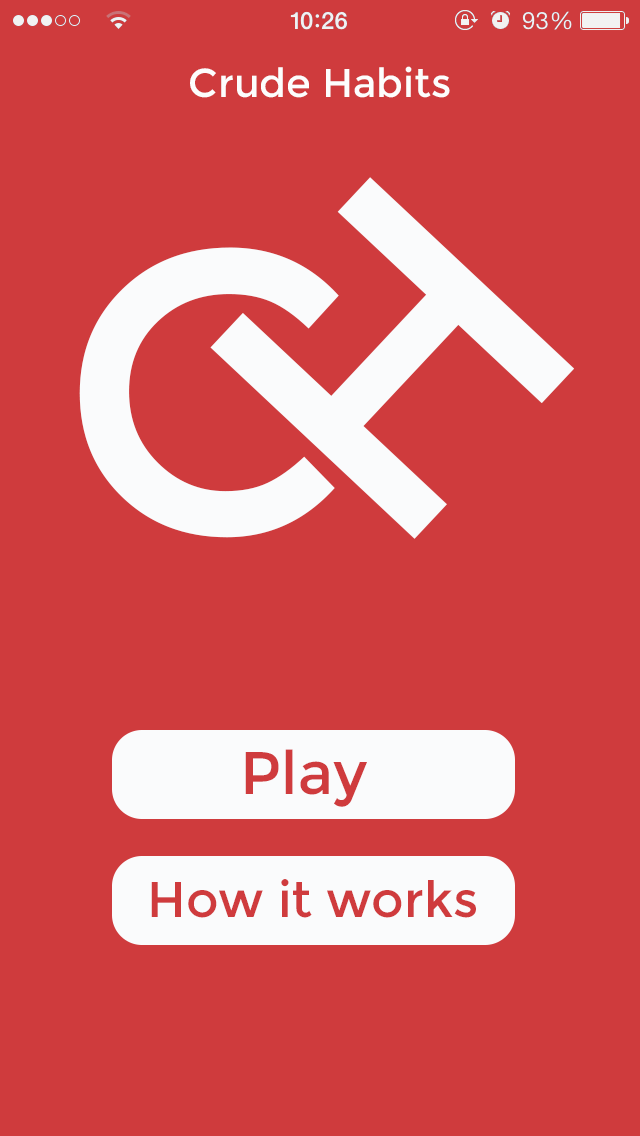
<style>
.page{position:relative;width:640px;height:1136px;background:#cf3b3d}
.page>*{position:absolute;margin:0}
.t1{font:40px "Montserrat-Regular";color:#fdfdfd}
.t2{font:400px "Montserrat-Regular";color:#fafbfc}
.t3{font:60px "Montserrat-Regular";color:#cf3b3d}
.t4{font:50px "Montserrat-Regular";color:#cf3b3d}
</style>
<div class="page">
<p class="t1" style="left:190px;top:66px;width:260px;height:32px">Crude Habits</p>
<p class="t2" style="left:210px;top:177px;width:365px;height:362px;rotate:-47deg">H</p>
<p class="t2" style="left:79px;top:247px;width:260px;height:291px">C</p>
<p class="t3" style="left:245px;top:749px;width:122px;height:58px">Play</p>
<p class="t4" style="left:151px;top:879px;width:325px;height:39px">How it works</p>
</div>
